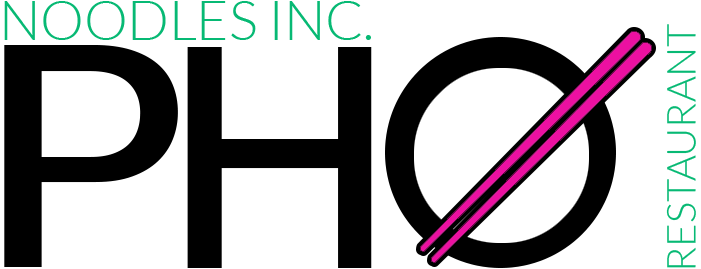
<style>
.page{position:relative;width:701px;height:269px;background:#ffffff}
.page>*{position:absolute;margin:0}
.t1{font:54.5px "Lato-Light";color:#07b974}
.t2{font:40px "Lato-Light";color:#07b974}
.t3{font:311.5px "Kalinga-Bold";color:#000000;scale:1.06 1}
.t4{font:310.8px "Kalinga-Bold";color:#000000;scale:0.97 1}
</style>
<div class="page">
<p class="t1" style="left:4px;top:1px;width:367px;height:39px">NOODLES INC.</p>
<p class="t2" style="left:666px;top:24px;width:30px;height:244px;rotate:-90deg">RESTAURANT</p>
<p class="t3" style="left:4px;top:45px;width:174px;height:222px">P</p>
<p class="t4" style="left:187px;top:47px;width:185px;height:221px">H</p>
</div>
